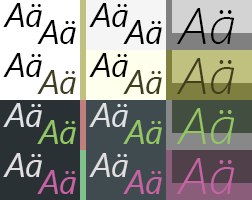
<style>
.page{position:relative;width:252px;height:200px}
.page>*{position:absolute;margin:0}
.t1{font:33px "SegoeUI-Italic";color:#000000}
.t2{font:51.3px "SegoeUI-LightItalic";color:#000000}
.t3{font:51.3px "SegoeUI-LightItalic";color:#3f3f1f}
.t4{font:33px "SegoeUI-Italic";color:#3f3f1f}
.t5{font:33px "SegoeUI-Italic";color:#e0e2e4}
.t6{font:51.3px "SegoeUI-LightItalic";color:#93c763}
.t7{font:33px "SegoeUI-Italic";color:#93c763}
.t8{font:33px "SegoeUI-Italic";color:#e3dee1}
.t9{font:51.3px "SegoeUI-LightItalic";color:#c763a5}
.t10{font:33px "SegoeUI-Italic";color:#c763a5}
</style>
<div class="page">
<p class="t1" style="left:3px;top:3px;width:39px;height:24px">Aä</p>
<p class="t1" style="left:89px;top:3px;width:39px;height:24px">Aä</p>
<p class="t2" style="left:177px;top:8px;width:58px;height:36px">Aä</p>
<p class="t1" style="left:37px;top:20px;width:39px;height:24px">Aä</p>
<p class="t1" style="left:123px;top:20px;width:39px;height:24px">Aä</p>
<p class="t1" style="left:3px;top:53px;width:39px;height:24px">Aä</p>
<p class="t1" style="left:89px;top:53px;width:39px;height:24px">Aä</p>
<p class="t3" style="left:177px;top:58px;width:58px;height:36px">Aä</p>
<p class="t4" style="left:37px;top:70px;width:39px;height:24px">Aä</p>
<p class="t4" style="left:123px;top:70px;width:39px;height:24px">Aä</p>
<p class="t5" style="left:3px;top:103px;width:39px;height:24px">Aä</p>
<p class="t5" style="left:89px;top:103px;width:39px;height:24px">Aä</p>
<p class="t6" style="left:177px;top:108px;width:58px;height:36px">Aä</p>
<p class="t7" style="left:37px;top:120px;width:39px;height:24px">Aä</p>
<p class="t7" style="left:123px;top:120px;width:39px;height:24px">Aä</p>
<p class="t8" style="left:3px;top:153px;width:39px;height:24px">Aä</p>
<p class="t8" style="left:89px;top:153px;width:39px;height:24px">Aä</p>
<p class="t9" style="left:177px;top:158px;width:58px;height:36px">Aä</p>
<p class="t10" style="left:37px;top:170px;width:39px;height:24px">Aä</p>
<p class="t10" style="left:123px;top:170px;width:39px;height:24px">Aä</p>
</div>
